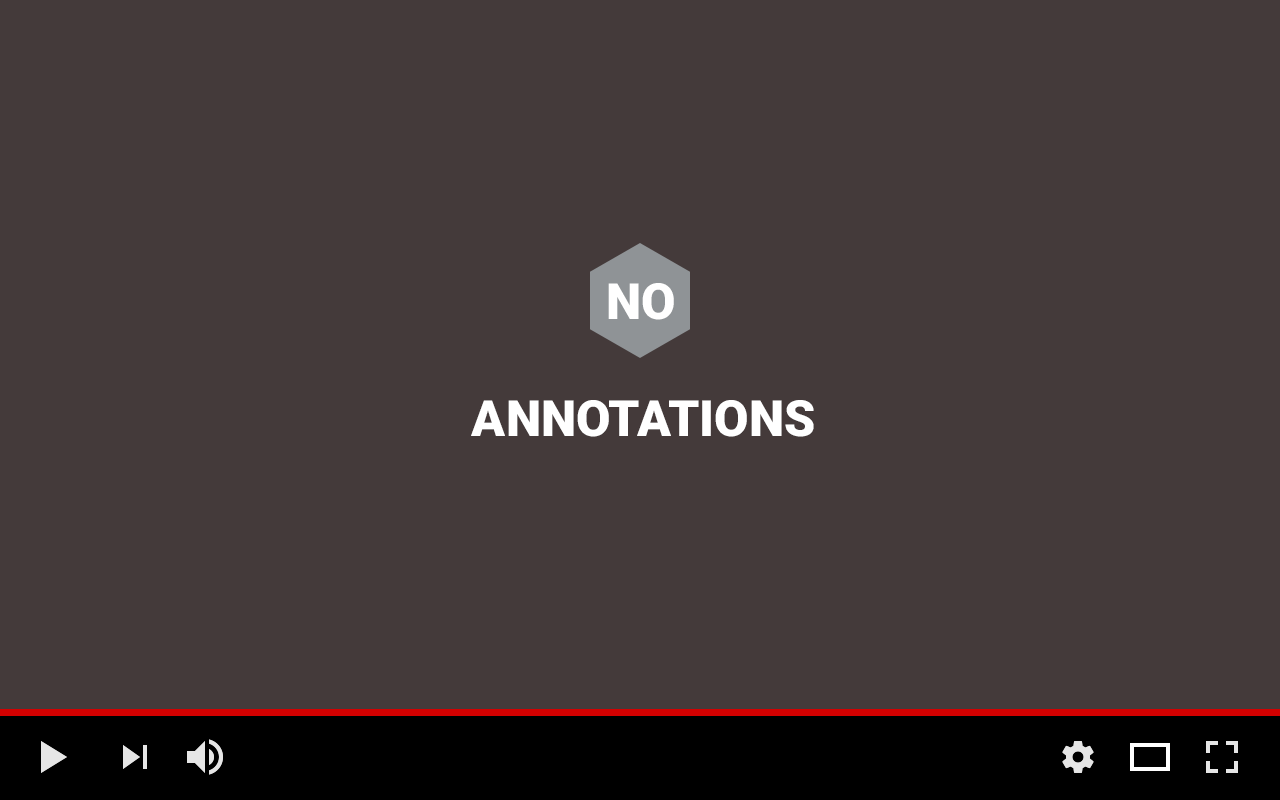
<style>
.page{position:relative;width:1280px;height:800px;background:#443a3a}
.page>*{position:absolute;margin:0}
.t1{font:50px "Roboto-Black";color:#ffffff}
</style>
<div class="page">
<p class="t1" style="left:471px;top:400px;width:343px;height:37px">ANNOTATIONS</p>
</div>
